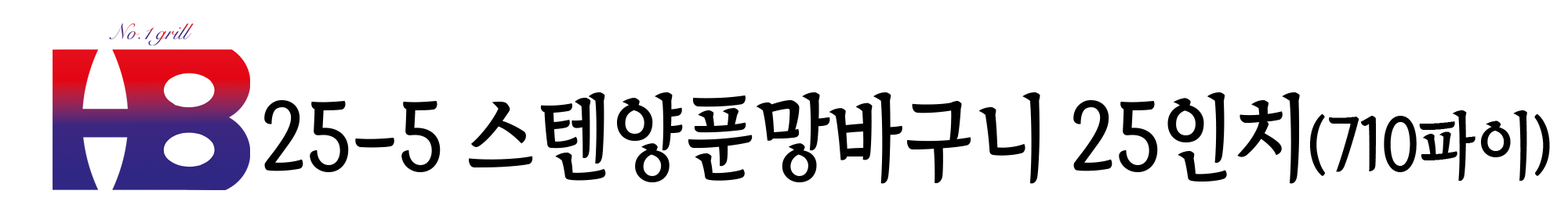
<style>
.page{position:relative;width:1568px;height:205px;background:#ffffff}
.page>*{position:absolute;margin:0}
.t1{font:93.7px "TheIndependenceHallofKorea-Regular";color:#000000;scale:0.89 1}
.t2{font:73.2px "TheIndependenceHallofKorea-Regular";color:#000000;scale:0.89 1}
</style>
<div class="page">
<p class="t1" style="left:264px;top:93px;width:1286px;height:91px">25-5 스텐양푼망바구니 25인치<span class="t2">(710파이)</span></p>
</div>
